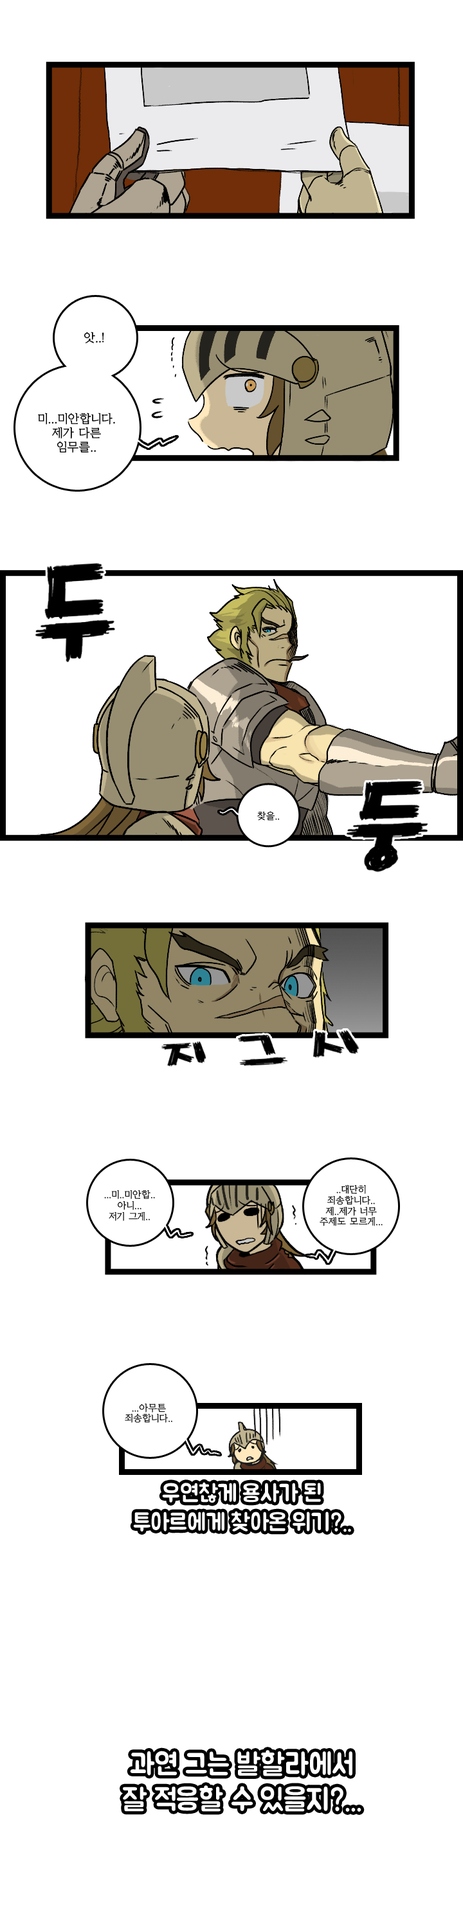
<style>
.page{position:relative;width:463px;height:1928px;background:#ffffff}
.page>*{position:absolute;margin:0}
.t1{font:11.6px "KoreanYMJ-B";color:#000000}
.t2{font:9px "KoreanYMJ-B";color:#000000}
</style>
<div class="page">
<p class="t1" style="left:84px;top:332px;width:20px;height:11px">앗..!</p>
<p class="t1" style="left:38px;top:413px;width:77px;height:40px;text-align:center">미...미안합니다.<br>제가 다른<br>임무를..</p>
<p class="t2" style="left:257px;top:811px;width:22px;height:10px">찾을..</p>
<p class="t2" style="left:104px;top:1190px;width:51px;height:31px;text-align:center">...미..미안합..<br>아니...<br>저기 그게..</p>
<p class="t2" style="left:319px;top:1185px;width:63px;height:41px;text-align:center">..대단히<br>죄송합니다..<br>제..제가 너무<br>주제도 모르게...</p>
<p class="t2" style="left:125px;top:1404px;width:47px;height:19px;text-align:center">...아무튼<br>죄송합니다..</p>
</div>
